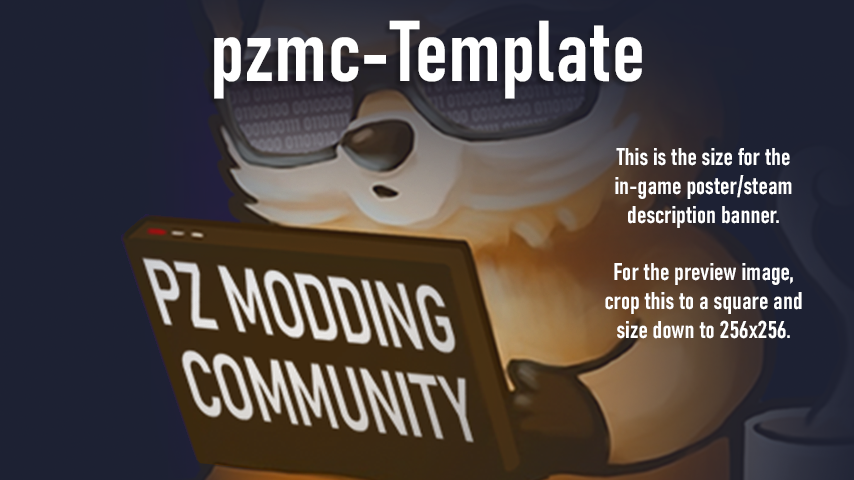
<style>
.page{position:relative;width:854px;height:480px;background:#1d2133}
.page>*{position:absolute;margin:0}
.t1{font:85px "Bahnschrift-SemiBoldCondensed";color:#ffffff;font-weight:bold}
.t2{font:24px "Bahnschrift-SemiBoldCondensed";color:#ffffff;font-weight:bold}
</style>
<div class="page">
<p class="t1" style="left:214px;top:20px;width:428px;height:79px">pzmc-Template</p>
<p class="t2" style="left:605px;top:148px;width:197px;height:191px;text-align:center">This is the size for the in-game poster/steam description banner.<br><br>For the preview image, crop this to a square and size down to 256x256.</p>
</div>
